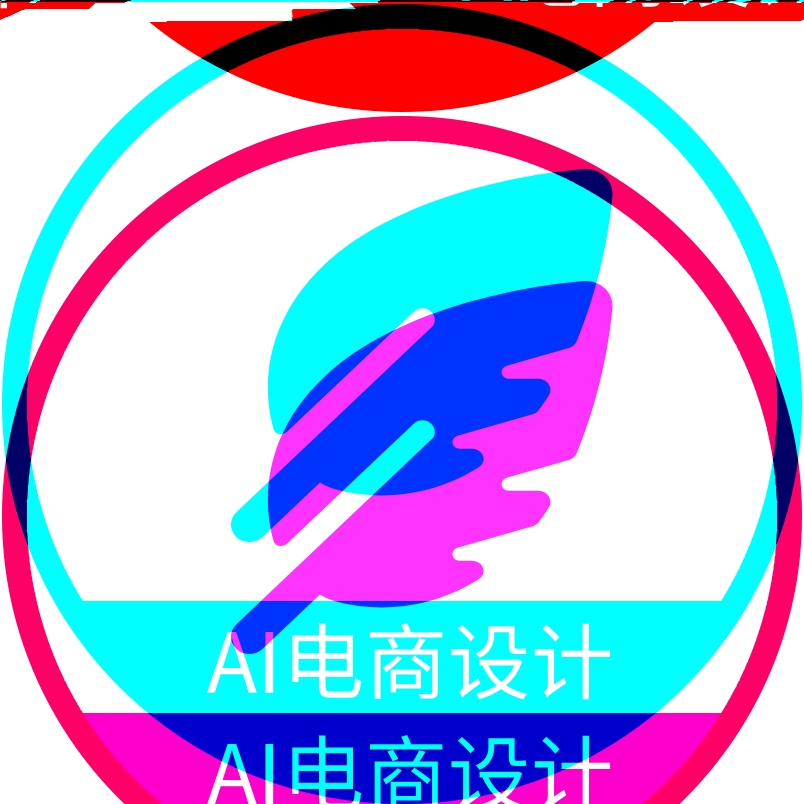
<style>
.page{position:relative;width:804px;height:804px;background:#ffffff}
.page>*{position:absolute;margin:0}
.t1{font:83.1px "MicrosoftYaHei";color:#ffffff}
</style>
<div class="page">
<p class="t1" style="left:206px;top:621px;width:405px;height:77px">AI电商设计</p>
</div>
